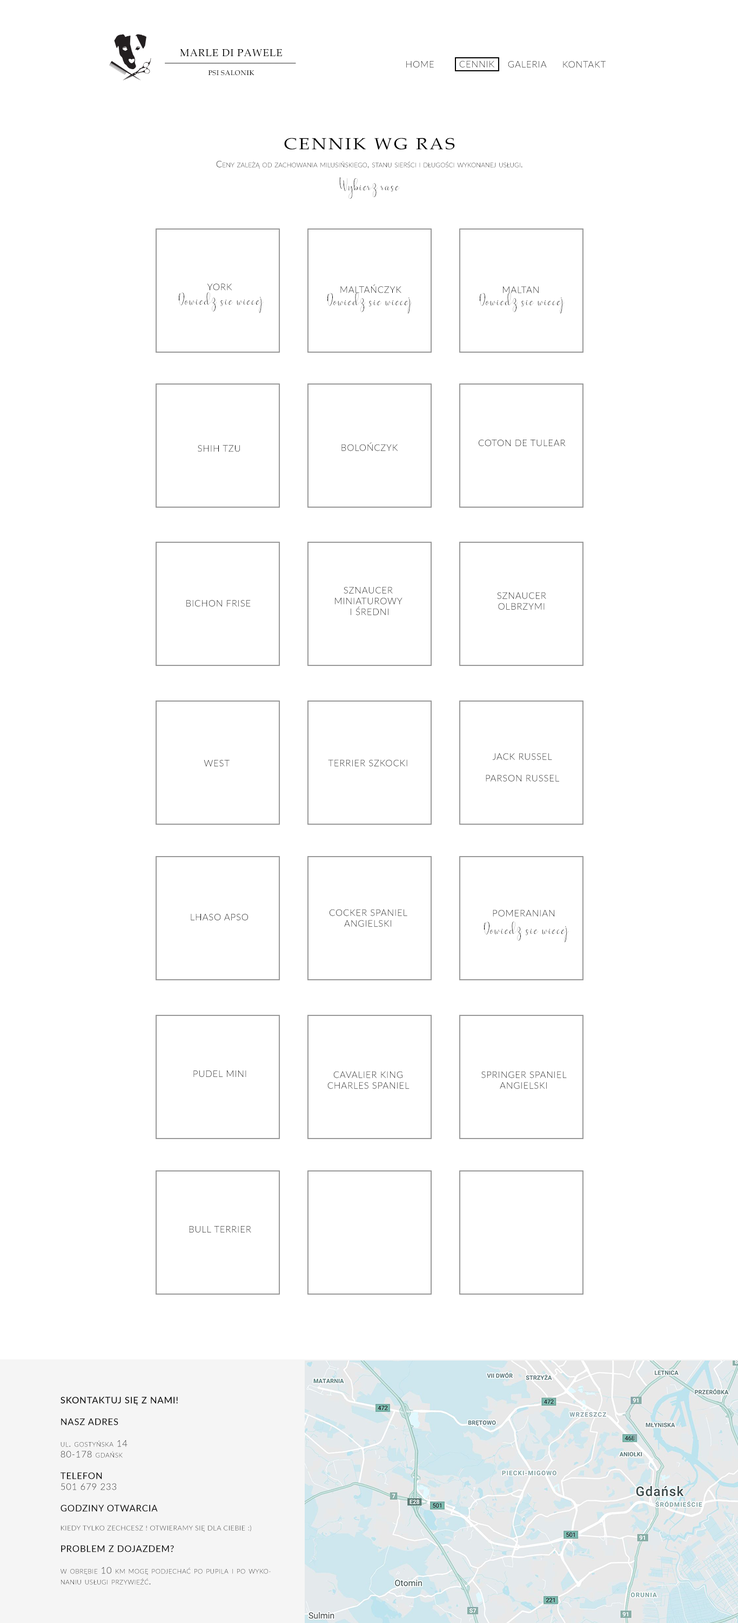
<style>
.page{position:relative;width:738px;height:1623px;background:#ffffff}
.page>*{position:absolute;margin:0}
.t1{font:10.1px "BookAntiqua";letter-spacing:0.05em;color:#000000}
.t2{font:9px "Lato-Light";letter-spacing:0.05em}
.t3{font:9px "Lato-Light";letter-spacing:0.05em;color:#000000}
.t4{font:6.7px "BookAntiqua";letter-spacing:0.05em;color:#000000}
.t5{font:16.2px "BookAntiqua";letter-spacing:0.1em;color:#000000;text-transform:uppercase;scale:1.11 1}
.t6{font:9px "Lato-Light";letter-spacing:0.005em;font-variant:small-caps}
.t7{font:18px "yesterday";letter-spacing:0.05em;color:#000000}
.t8{font:9px "Lato-Light";letter-spacing:0.05em;color:#000000;font-variant:small-caps}
.t9{font:9px "Lato-Light";letter-spacing:0.05em;font-variant:small-caps}
.t10{font:9px "Lato-Light";letter-spacing:0.05em;color:#050505;font-variant:small-caps}
.t11{font:9px "Lato-Medium";letter-spacing:0.05em;color:#050505;text-transform:uppercase}
.t12{font:9px "Lato-Regular";letter-spacing:0.05em;color:#050505;text-transform:uppercase}
.t13{font:9px "Lato-Light";letter-spacing:0.05em;color:#050505;text-transform:uppercase}
.t14{font:6.7px "Lato-Light";letter-spacing:0.05em;color:#050505;font-variant:small-caps}
</style>
<div class="page">
<p class="t1" style="left:180px;top:49px;width:102px;height:8px">MARLE DI PAWELE</p>
<p class="t2" style="left:406px;top:61px;width:28px;height:6px">HOME</p>
<p class="t3" style="left:459px;top:60px;width:35px;height:7px">CENNIK</p>
<p class="t3" style="left:508px;top:61px;width:38px;height:6px">GALERIA</p>
<p class="t2" style="left:563px;top:61px;width:42px;height:7px">KONTAKT</p>
<p class="t4" style="left:208px;top:70px;width:46px;height:6px">PSI SALONIK</p>
<p class="t5" style="left:284px;top:138px;width:171px;height:12px">CENNIK wg RAS</p>
<p class="t6" style="left:216px;top:160px;width:306px;height:8px">Ceny zależą od zachowania milusińskiego, stanu sierści i długości wykonanej usługi.</p>
<p class="t7" style="left:339px;top:177px;width:61px;height:22px">Wybierz rase</p>
<p class="t7" style="left:179px;top:292px;width:84px;height:21px">Dowiedz sie wiecej</p>
<p class="t8" style="left:207px;top:283px;width:25px;height:8px">YORK</p>
<p class="t7" style="left:327px;top:293px;width:84px;height:21px">Dowiedz sie wiecej</p>
<p class="t8" style="left:340px;top:284px;width:61px;height:9px">MALTAŃCZYK</p>
<p class="t7" style="left:480px;top:293px;width:84px;height:21px">Dowiedz sie wiecej</p>
<p class="t8" style="left:503px;top:286px;width:35px;height:7px">MALTAN</p>
<p class="t8" style="left:198px;top:445px;width:42px;height:7px">SHIH TZU</p>
<p class="t8" style="left:341px;top:442px;width:57px;height:9px">BOLOŃCZYK</p>
<p class="t9" style="left:478px;top:440px;width:87px;height:6px">COTON DE TULEAR</p>
<p class="t8" style="left:335px;top:586px;width:67px;height:29px;text-align:center">SZNAUCER <br>MINIATUROWY<br> I ŚREDNI</p>
<p class="t8" style="left:497px;top:592px;width:49px;height:18px;text-align:center">SZNAUCER <br>OLBRZYMI</p>
<p class="t9" style="left:186px;top:600px;width:65px;height:6px">BICHON FRISE</p>
<p class="t9" style="left:204px;top:760px;width:25px;height:6px">WEST</p>
<p class="t9" style="left:328px;top:759px;width:79px;height:7px">TERRIER SZKOCKI</p>
<p class="t8" style="left:485px;top:753px;width:74px;height:28px;text-align:center">JACK RUSSEL <br><br>PARSON RUSSEL</p>
<p class="t8" style="left:191px;top:914px;width:57px;height:6px">LHASO APSO</p>
<p class="t8" style="left:329px;top:909px;width:78px;height:18px;text-align:center">COCKER SPANIEL <br>ANGIELSKI</p>
<p class="t8" style="left:492px;top:909px;width:62px;height:7px">POMERANIAN</p>
<p class="t7" style="left:484px;top:921px;width:84px;height:21px">Dowiedz sie wiecej</p>
<p class="t8" style="left:193px;top:1070px;width:53px;height:7px">PUDEL MINI</p>
<p class="t8" style="left:327px;top:1071px;width:82px;height:18px;text-align:center">CAVALIER KING <br>CHARLES SPANIEL</p>
<p class="t8" style="left:481px;top:1071px;width:85px;height:18px;text-align:center">SPRINGER SPANIEL <br>ANGIELSKI</p>
<p class="t9" style="left:189px;top:1226px;width:62px;height:6px">BULL TERRIER</p>
<p class="t10" style="left:60px;top:1396px;width:211px;height:188px"><span class="t11">SKONTAKTUJ SIĘ Z NAMI!<br><br></span><span class="t12">NASZ ADRES<br><br></span>ul. gostyńska 14<br>80-178 gdańsk<br><br><span class="t12">telefon<br></span><span class="t13">501 679 233<br><br></span><span class="t12">GODZINY OTWARCIA<br><br></span><span class="t14">KIEDY TYLKO ZECHCESZ ! OTWIERAMY SIĘ DLA CIEBIE :)<br><br></span><span class="t12">problem z dojazdem?<br><br></span>w obrębie 10 km mogę podjechać po pupila i po wykonaniu usługi przywieźć.</p>
</div>
